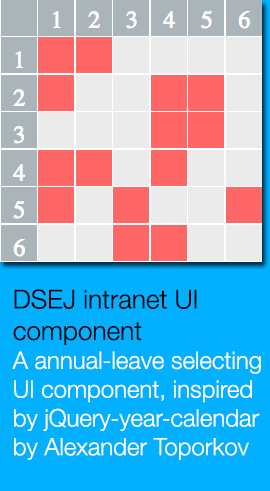
<style>
.page{position:relative;width:270px;height:491px;background:#03afff}
.page>*{position:absolute;margin:0}
.t1{font:24px "HelveticaNeue-Light";color:#ffffff}
.t2{font:26.2px "HelveticaNeue-Light";color:#000000}
</style>
<div class="page">
<p class="t1" style="left:12px;top:289px;width:249px;height:171px"><span class="t2">DSEJ intranet UI <br>component<br></span>A annual-leave selecting <br>UI component, inspired <br>by jQuery-year-calendar <br>by Alexander Toporkov</p>
</div>
